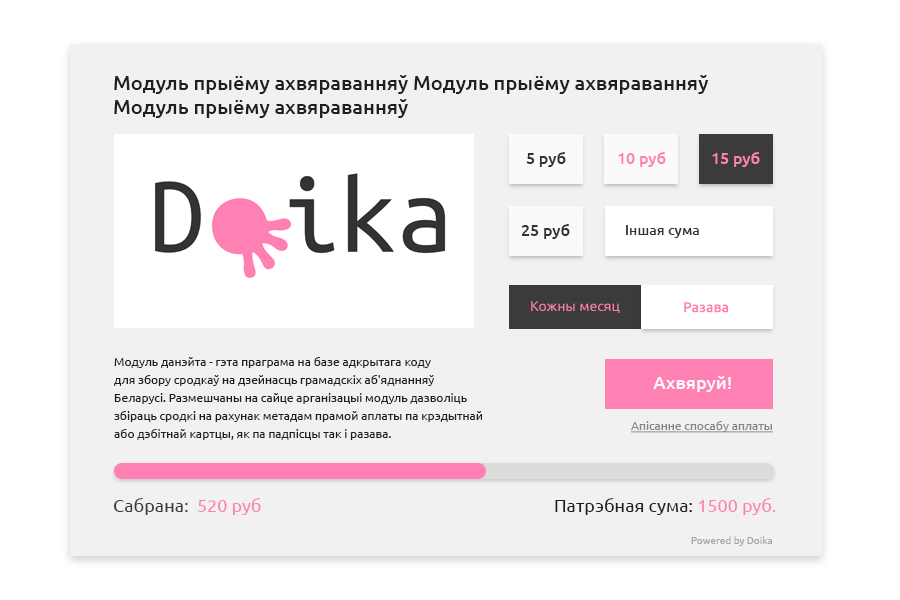
<style>
.page{position:relative;width:900px;height:600px;background:#f1f1f1}
.page>*{position:absolute;margin:0}
.t1{font:20px/24px "Ubuntu-Medium";color:#1f1f1f}
.t2{font:16px "Ubuntu-Medium";color:#333333}
.t3{font:16px "Ubuntu-Medium";color:#ff80b2}
.t4{font:14px "Ubuntu-Medium";color:#333333}
.t5{font:14px "Ubuntu-Regular";color:#ff80b2}
.t6{font:14px "Ubuntu-Medium";color:#ff80b2}
.t7{font:12px/18px "Ubuntu-Regular";color:#1f1f1f}
.t8{font:18px "Ubuntu-Medium";color:#fbfbfb}
.t9{font:12px "Ubuntu-Regular";color:#858585;text-decoration:underline}
.t10{font:18px "Ubuntu-Regular";color:#3b3b3b}
.t11{font:18px "Ubuntu-Regular";color:#ff80b2}
.t12{font:18px "Ubuntu-Regular";color:#1f1f1f}
.t13{font:10px "Ubuntu-Regular";color:#a5a5a5}
</style>
<div class="page">
<p class="t1" style="left:114px;top:75px;width:595px;height:43px">Модуль прыёму ахвяраванняў Модуль прыёму ахвяраванняў <br>Модуль прыёму ахвяраванняў</p>
<p class="t2" style="left:526px;top:152px;width:40px;height:15px">5 руб</p>
<p class="t3" style="left:618px;top:152px;width:48px;height:15px">10 руб</p>
<p class="t3" style="left:712px;top:152px;width:48px;height:15px">15 руб</p>
<p class="t2" style="left:521px;top:224px;width:49px;height:15px">25 руб</p>
<p class="t4" style="left:626px;top:225px;width:73px;height:13px">Iншая сума</p>
<p class="t5" style="left:531px;top:301px;width:89px;height:12px">Кожны месяц</p>
<p class="t6" style="left:684px;top:302px;width:44px;height:11px">Разава</p>
<p class="t7" style="left:114px;top:357px;width:368px;height:83px">Модуль данэйта - гэта праграма на базе адкрытага коду <br>для збору сродкаў на дзейнасць грамадскіх аб'яднанняў <br>Беларусі. Размешчаны на сайце арганізацыі модуль дазволіць <br>збіраць сродкі на рахунак метадам прамой аплаты па крэдытнай <br>або дэбітнай картцы, як па падпісцы так і разава.</p>
<p class="t8" style="left:653px;top:376px;width:78px;height:16px">Ахвяруй!</p>
<p class="t9" style="left:631px;top:421px;width:142px;height:12px">Апiсанне спосабу аплаты</p>
<p class="t10" style="left:114px;top:498px;width:147px;height:17px">Сабрана:  <span class="t11">520 руб</span></p>
<p class="t12" style="left:555px;top:498px;width:221px;height:17px">Патрэбная сума: <span class="t11">1500 руб.</span></p>
<p class="t13" style="left:691px;top:536px;width:81px;height:10px">Powered by Doika</p>
</div>
